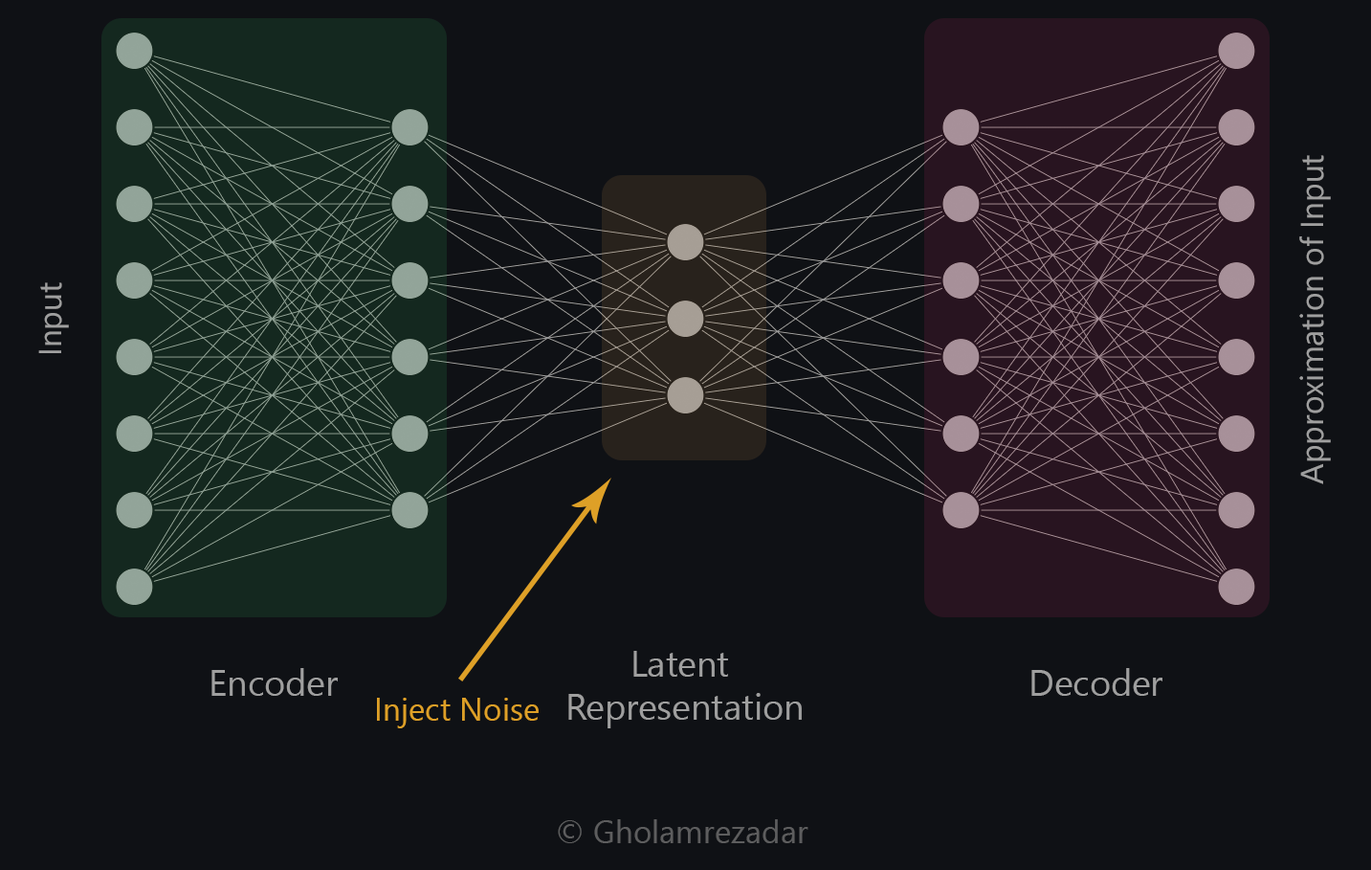
<style>
.page{position:relative;width:1371px;height:870px;background:#0f1115}
.page>*{position:absolute;margin:0}
.t1{font:31.9px "SegoeUI";color:#9f9f9f}
.t2{font:35.9px "SegoeUI";color:#9f9f9f}
.t3{font:31.9px "SegoeUI";color:#dea027}
.t4{font:31.9px "SegoeUI";color:#5d5d5e}
</style>
<div class="page">
<p class="t1" style="left:1299px;top:155px;width:32px;height:329px;rotate:-90deg">Approximation of Input</p>
<p class="t1" style="left:38px;top:282px;width:31px;height:71px;rotate:-90deg">Input</p>
<p class="t2" style="left:568px;top:651px;width:234px;height:77px;text-align:center">Latent <br>Representation</p>
<p class="t2" style="left:211px;top:668px;width:127px;height:28px">Encoder</p>
<p class="t2" style="left:1031px;top:668px;width:131px;height:28px">Decoder</p>
<p class="t3" style="left:377px;top:697px;width:162px;height:31px">Inject Noise</p>
<p class="t4" style="left:558px;top:819px;width:250px;height:24px">© Gholamrezadar</p>
</div>
